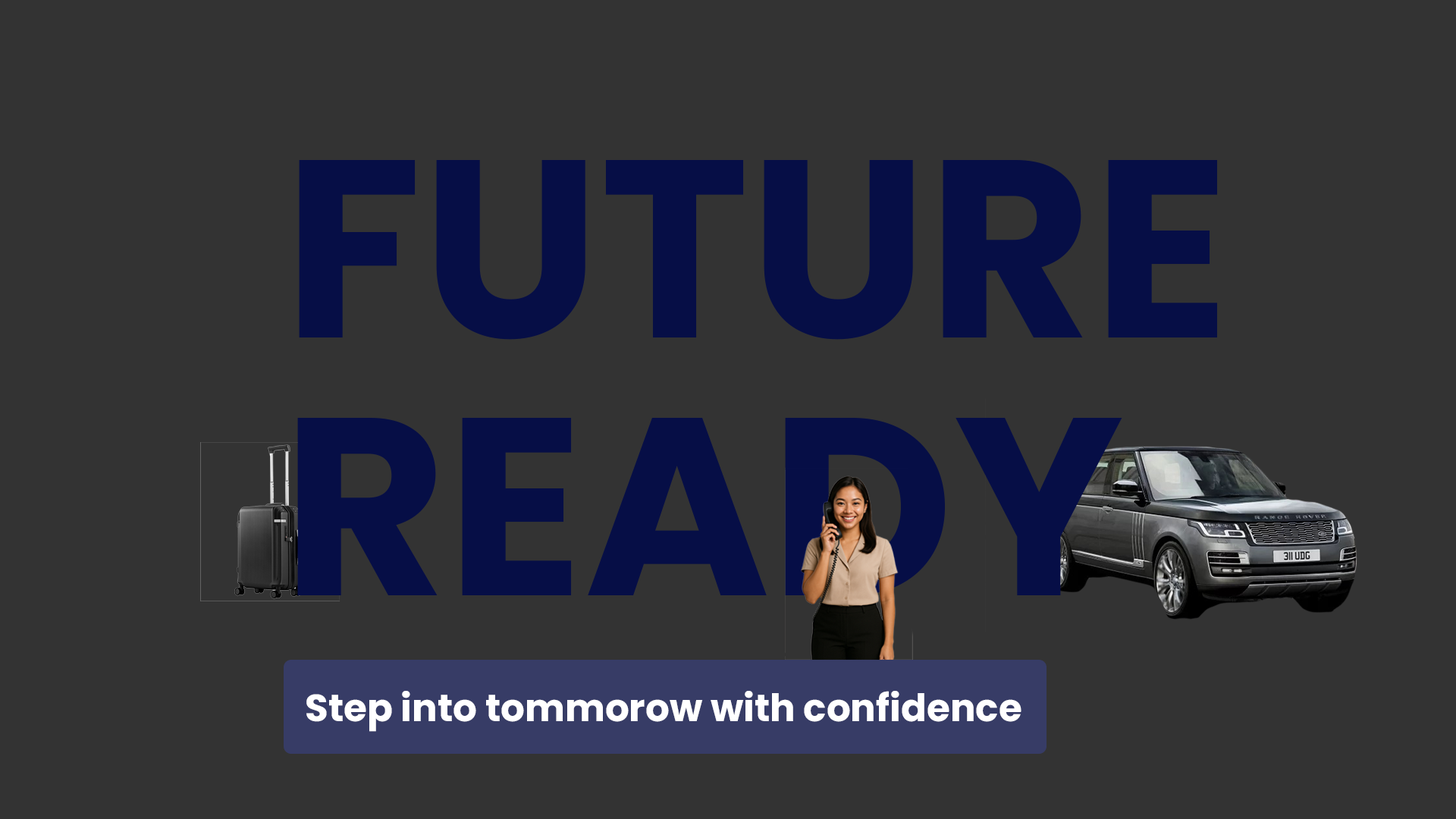
<style>
.page{position:relative;width:1456px;height:819px;background:#333333}
.page>*{position:absolute;margin:0}
.t1{font:252.8px "Poppins-Bold";color:#060e46}
.t2{font:37.9px "Poppins-Bold";color:#ffffff}
</style>
<div class="page">
<p class="t1" style="left:299px;top:160px;width:918px;height:180px">FUTURE</p>
<p class="t1" style="left:297px;top:418px;width:825px;height:177px">READY</p>
<p class="t2" style="left:306px;top:691px;width:715px;height:41px">Step into tommorow with confidence</p>
</div>
